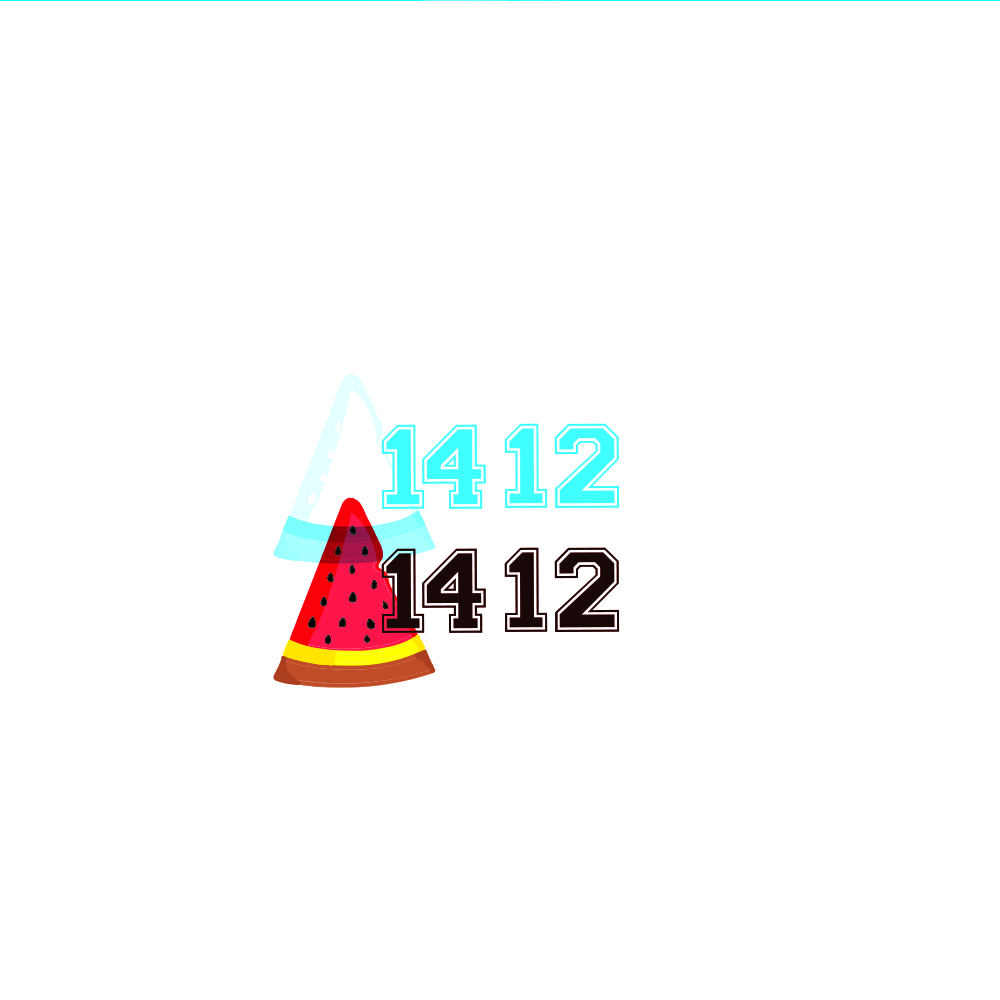
<style>
.page{position:relative;width:1000px;height:1000px;background:#ffffff}
.page>*{position:absolute;margin:0}
.t1{font:120px "Varsity-Regular";color:#40ffff}
</style>
<div class="page">
<p class="t1" style="left:381px;top:422px;width:239px;height:86px">1412</p>
</div>
